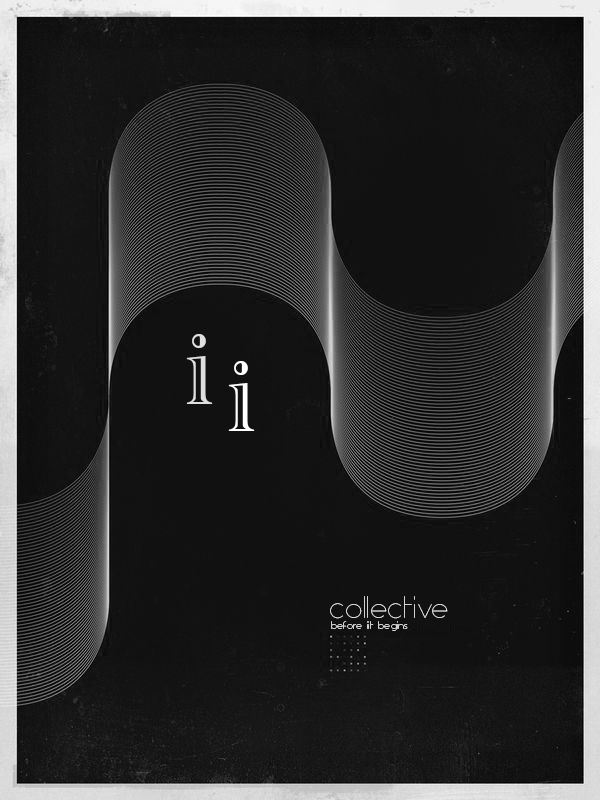
<style>
.page{position:relative;width:600px;height:800px;background:#111111}
.page>*{position:absolute;margin:0}
.t1{font:117px "AcademyEngravedLetPlain";letter-spacing:0.01em;color:#dfdfdf}
.t2{font:117px "AcademyEngravedLetPlain";letter-spacing:0.01em;color:#ffffff}
.t3{font:29px "Aspergit-Light";letter-spacing:0.01em}
.t4{font:10px "Aspergit-Light";letter-spacing:0.01em}
</style>
<div class="page">
<p class="t1" style="left:186px;top:334px;width:27px;height:70px">i</p>
<p class="t2" style="left:228px;top:361px;width:27px;height:70px">i</p>
<p class="t3" style="left:330px;top:596px;width:118px;height:23px">collective</p>
<p class="t4" style="left:331px;top:621px;width:77px;height:10px">before iit begins</p>
</div>
